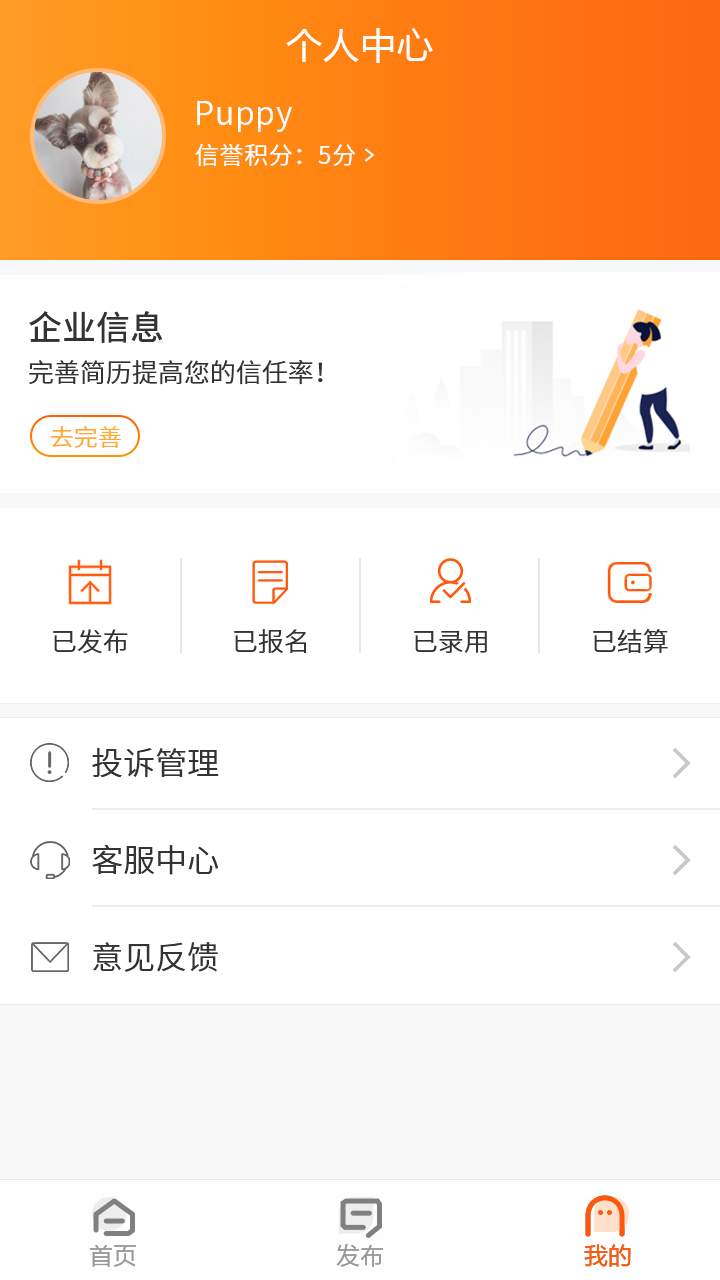
<style>
.page{position:relative;width:720px;height:1280px;background:#ffffff}
.page>*{position:absolute;margin:0}
.t1{font:36px "MicrosoftYaHei";letter-spacing:0.03em;color:#ffffff}
.t2{font:32px "NotoSansCJKsc-DemiLight";letter-spacing:0.03em;color:#ffffff}
.t3{font:24px "NotoSansCJKsc-DemiLight";letter-spacing:0.03em;color:#ffffff}
.t4{font:34px "NotoSansCJKsc-Medium";color:#333333;font-variant:small-caps}
.t5{font:26px "NotoSansCJKsc-DemiLight";color:#333333;font-variant:small-caps}
.t6{font:24px "NotoSansCJKsc-DemiLight";color:#ffab2f;font-variant:small-caps}
.t7{font:32px "NotoSansCJKsc-DemiLight";color:#333333;font-variant:small-caps}
.t8{font:24px "FZLTHJW--GB1-0";color:#999999}
.t9{font:24px "FZLTHJW--GB1-0";color:#ff580a}
</style>
<div class="page">
<p class="t1" style="left:286px;top:28px;width:147px;height:35px">个人中心</p>
<p class="t2" style="left:197px;top:101px;width:95px;height:31px">Puppy</p>
<p class="t3" style="left:195px;top:144px;width:160px;height:22px">信誉积分：5分</p>
<p class="t4" style="left:29px;top:311px;width:133px;height:32px">企业信息</p>
<p class="t5" style="left:29px;top:359px;width:294px;height:26px">完善简历提高您的信任率！</p>
<p class="t6" style="left:51px;top:426px;width:70px;height:22px">去完善</p>
<p class="t5" style="left:53px;top:629px;width:75px;height:25px">已发布</p>
<p class="t5" style="left:234px;top:629px;width:72px;height:24px">已报名</p>
<p class="t5" style="left:593px;top:629px;width:75px;height:24px">已结算</p>
<p class="t5" style="left:414px;top:631px;width:73px;height:22px">已录用</p>
<p class="t7" style="left:92px;top:747px;width:127px;height:31px">投诉管理</p>
<p class="t7" style="left:92px;top:844px;width:126px;height:31px">客服中心</p>
<p class="t7" style="left:93px;top:942px;width:125px;height:30px">意见反馈</p>
<p class="t8" style="left:90px;top:1244px;width:46px;height:23px">首页</p>
<p class="t8" style="left:336px;top:1244px;width:47px;height:23px">发布</p>
<p class="t9" style="left:584px;top:1244px;width:47px;height:23px">我的</p>
<p class="t9" style="left:584px;top:1244px;width:47px;height:23px">我的</p>
</div>
